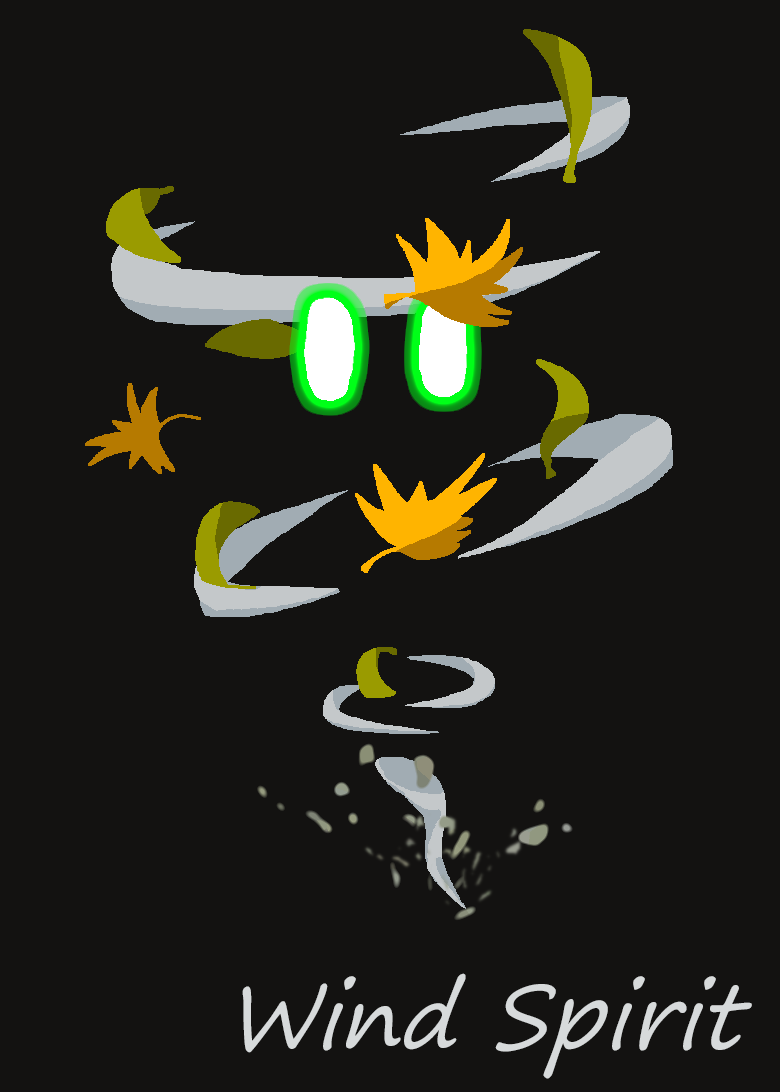
<style>
.page{position:relative;width:780px;height:1092px;background:#131211}
.page>*{position:absolute;margin:0}
.t1{font:89.1px "SegoePrint";letter-spacing:-0.005em;color:#d7dadb;font-style:italic}
</style>
<div class="page">
<p class="t1" style="left:242px;top:973px;width:510px;height:106px">Wind Spirit</p>
</div>
